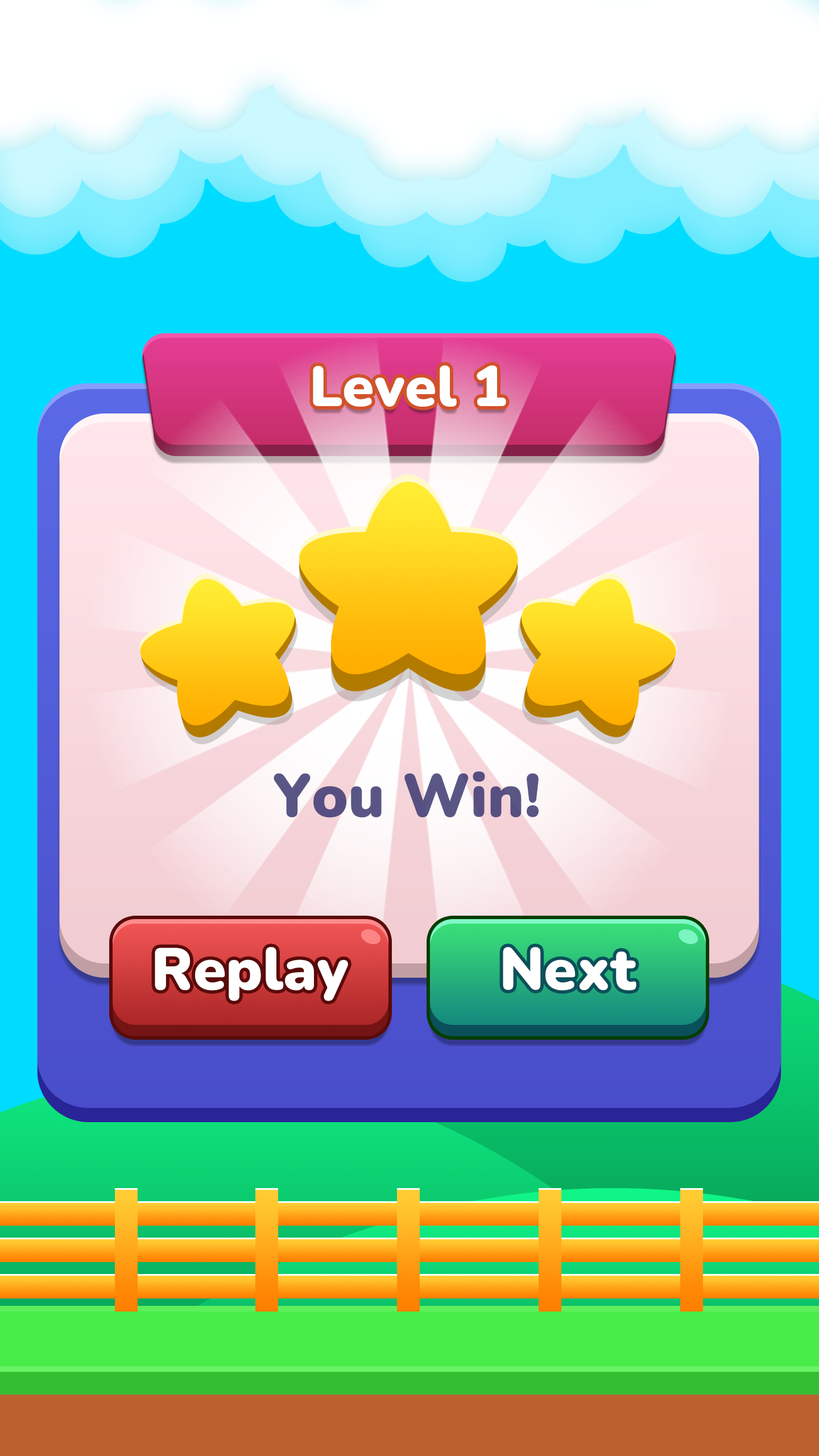
<style>
.page{position:relative;width:819px;height:1456px}
.page>*{position:absolute;margin:0}
.t1{font:56.9px "Nunito-Black";color:#ffffff}
.t2{font:60.7px "Nunito-Black";color:#595685}
.t3{font:59.1px "Nunito-Black";color:#ffffff}
</style>
<div class="page">
<p class="t1" style="left:313px;top:365px;width:193px;height:42px">Level 1</p>
<p class="t2" style="left:274px;top:771px;width:265px;height:47px">You Win!</p>
<p class="t3" style="left:155px;top:947px;width:193px;height:54px">Replay</p>
<p class="t3" style="left:503px;top:947px;width:133px;height:44px">Next</p>
</div>
